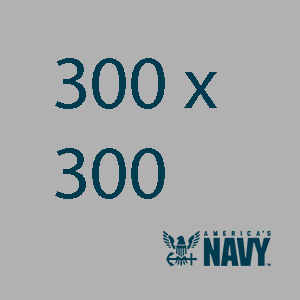
<style>
.page{position:relative;width:300px;height:300px;background:#b1b1b1}
.page>*{position:absolute;margin:0}
.t1{font:75px "MyriadPro-Regular";color:#003b4f}
</style>
<div class="page">
<p class="t1" style="left:55px;top:58px;width:162px;height:141px">300 x <br>300</p>
</div>
